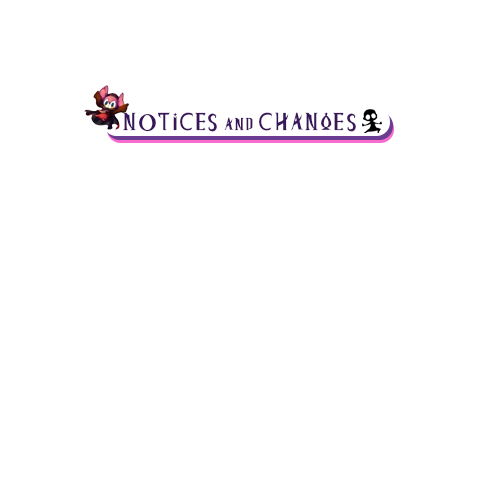
<style>
.page{position:relative;width:500px;height:500px;background:#ffffff}
.page>*{position:absolute;margin:0}
.t1{font:23.2px "MagiaRecordRegular";letter-spacing:0.025em;color:#3a155b;font-variant:small-caps}
</style>
<div class="page">
<p class="t1" style="left:123px;top:112px;width:233px;height:20px">NOTICES and CHANGES</p>
</div>
